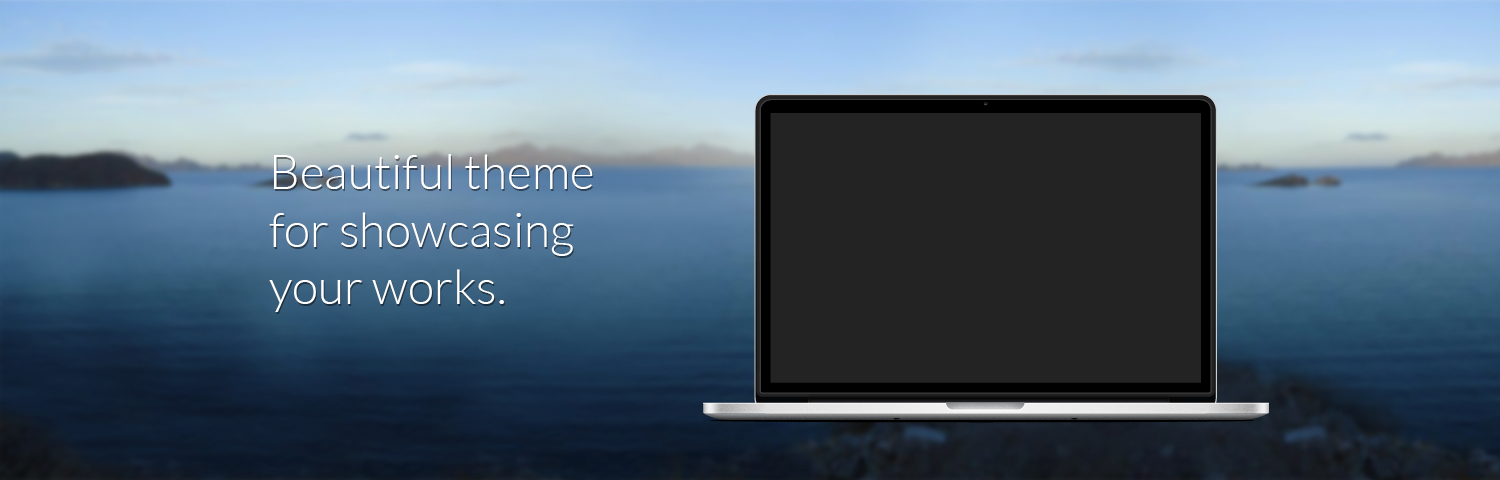
<style>
.page{position:relative;width:1500px;height:480px}
.page>*{position:absolute;margin:0}
.t1{font:48px/57.6px "Lato-Light";color:#ffffff}
</style>
<div class="page">
<p class="t1" style="left:269px;top:154px;width:324px;height:158px">Beautiful theme <br>for showcasing <br>your works.</p>
</div>
